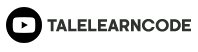
<style>
.page{position:relative;width:198px;height:52px;background:#ffffff}
.page>*{position:absolute;margin:0}
.t1{font:15.8px "Kamerik205-Regular3";color:#2f322e;text-transform:uppercase;font-weight:bold}
</style>
<div class="page">
<p class="t1" style="left:47px;top:19px;width:144px;height:13px">TaleLearnCode</p>
</div>
